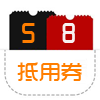
<style>
.page{position:relative;width:100px;height:100px;background:#ffffff}
.page>*{position:absolute;margin:0}
.t1{font:27.3px "TRENDS";color:#ff7e00}
.t2{font:27.3px "TRENDS";color:#f7f1f1}
.t3{font:21.8px "TRENDS";color:#ff7e00}
</style>
<div class="page">
<p class="t1" style="left:22px;top:23px;width:13px;height:20px">5</p>
<p class="t2" style="left:62px;top:23px;width:13px;height:20px">8</p>
<p class="t3" style="left:17px;top:62px;width:65px;height:20px">抵用券</p>
</div>
